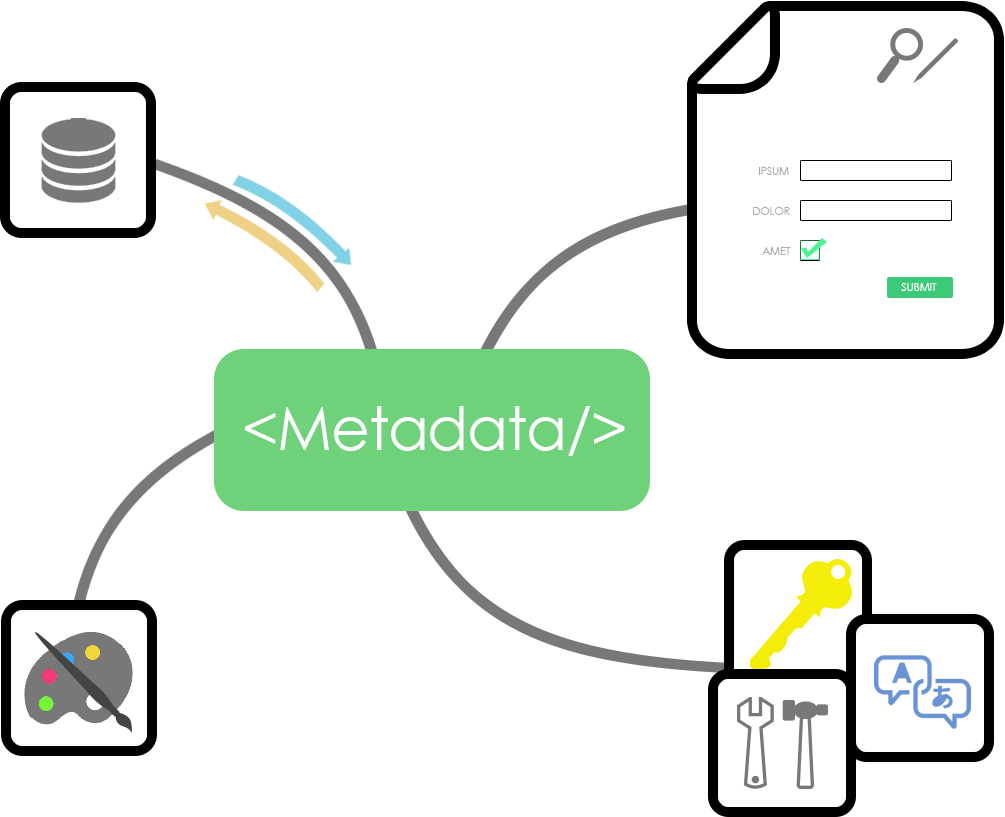
<style>
.page{position:relative;width:1005px;height:817px;background:#ffffff}
.page>*{position:absolute;margin:0}
.t1{font:11px "CenturyGothic";letter-spacing:-0.02em;color:#aaaaaa}
.t2{font:11px "CenturyGothic";letter-spacing:-0.02em;color:#ffffff}
.t3{font:60px "CenturyGothic";letter-spacing:-0.02em;color:#ffffff}
</style>
<div class="page">
<p class="t1" style="left:759px;top:167px;width:30px;height:8px">IPSUM</p>
<p class="t1" style="left:753px;top:207px;width:37px;height:8px">DOLOR</p>
<p class="t1" style="left:762px;top:247px;width:29px;height:8px">AMET</p>
<p class="t2" style="left:901px;top:283px;width:36px;height:8px">SUBMIT</p>
<p class="t3" style="left:245px;top:406px;width:380px;height:50px">&lt;Metadata/&gt;</p>
</div>
